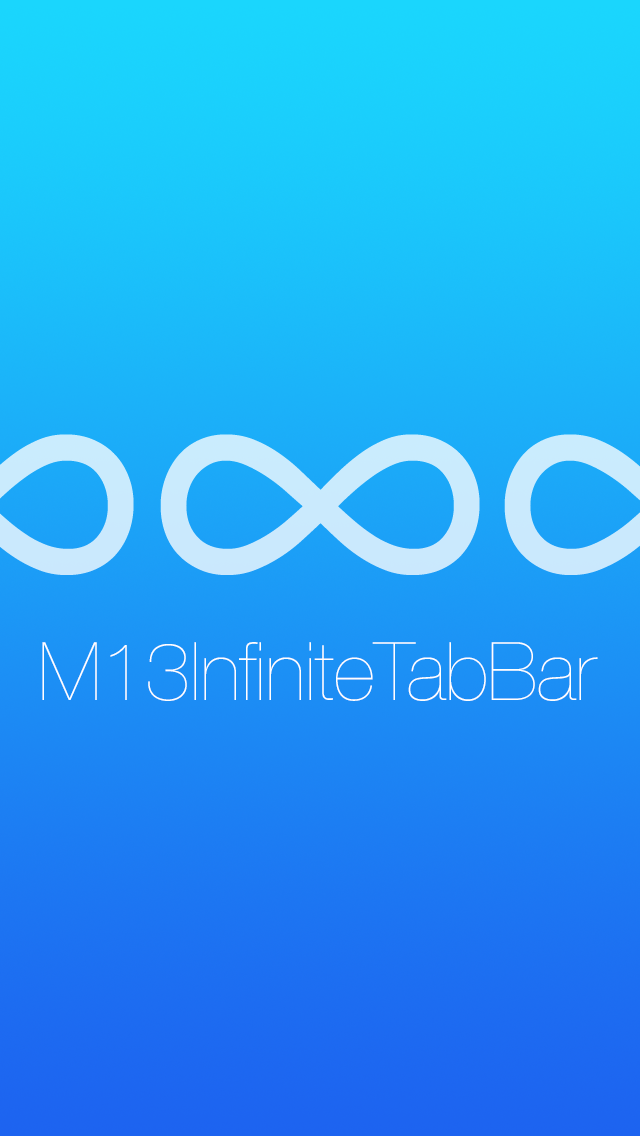
<style>
.page{position:relative;width:640px;height:1136px}
.page>*{position:absolute;margin:0}
.t1{font:491.2px "HelveticaNeue-Light";letter-spacing:-0.007em;color:#caeafd}
.t2{font:81.1px "HelveticaNeue-UltraLight";letter-spacing:-0.007em;color:#ffffff}
</style>
<div class="page">
<p class="t1" style="left:160px;top:434px;width:320px;height:141px">∞</p>
<p class="t2" style="left:42px;top:642px;width:556px;height:59px">M13InfiniteTabBar</p>
</div>
